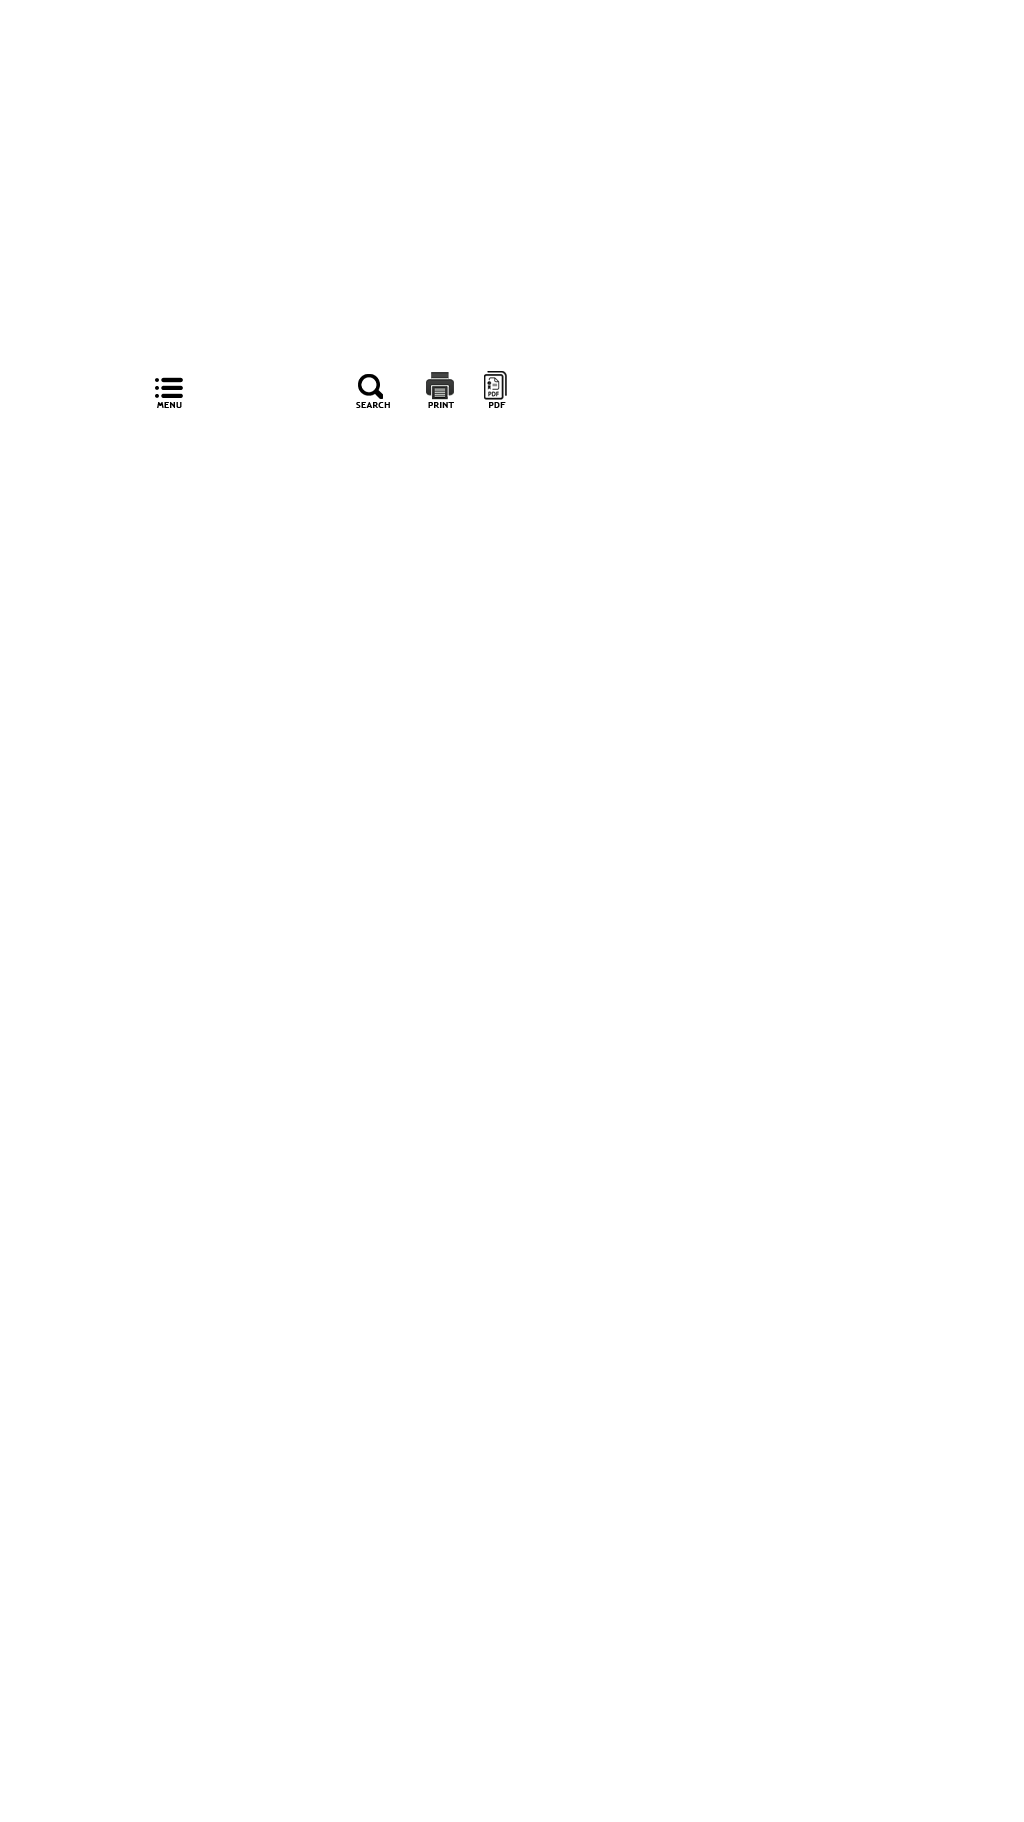
<style>
.page{position:relative;width:1024px;height:1822px;background:#ffffff}
.page>*{position:absolute;margin:0}
.t1{font:9px "TrebuchetMS-Bold";letter-spacing:0.04em;color:#000000}
</style>
<div class="page">
<p class="t1" style="left:157px;top:402px;width:25px;height:6px">MENU</p>
<p class="t1" style="left:356px;top:402px;width:34px;height:6px">SEARCH</p>
<p class="t1" style="left:428px;top:402px;width:26px;height:6px">PRINT</p>
<p class="t1" style="left:489px;top:402px;width:17px;height:6px">PDF</p>
</div>
